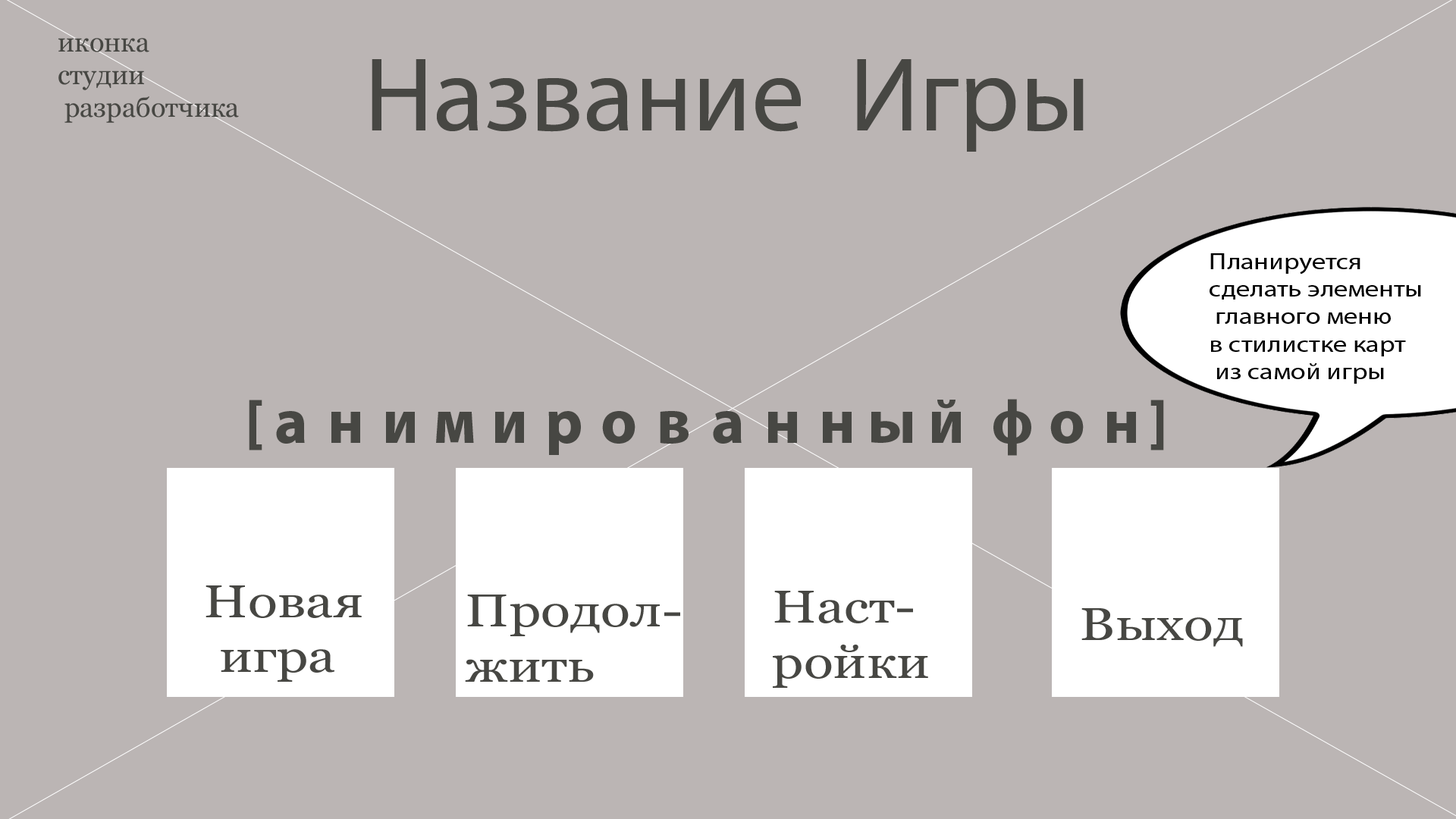
<style>
.page{position:relative;width:1456px;height:819px;background:#bbb5b4}
.page>*{position:absolute;margin:0}
.t1{font:22.9px "MyriadPro-Regular";color:#000000;scale:1.19 1}
.t2{font:45.9px "Georgia";color:#474743;scale:1.19 1}
</style>
<div class="page">
<p class="t1" style="left:1210px;top:253px;width:211px;height:131px">Планируется<br>сделать элементы<br> главного меню <br>в стилистке карт<br> из самой игры</p>
<p class="t2" style="left:206px;top:585px;width:156px;height:97px">Новая<br> игра</p>
<p class="t2" style="left:773px;top:591px;width:155px;height:97px">Наст-<br>ройки</p>
<p class="t2" style="left:465px;top:595px;width:215px;height:87px">Продол-<br>жить</p>
<p class="t2" style="left:1081px;top:608px;width:162px;height:39px">Выход</p>
</div>
